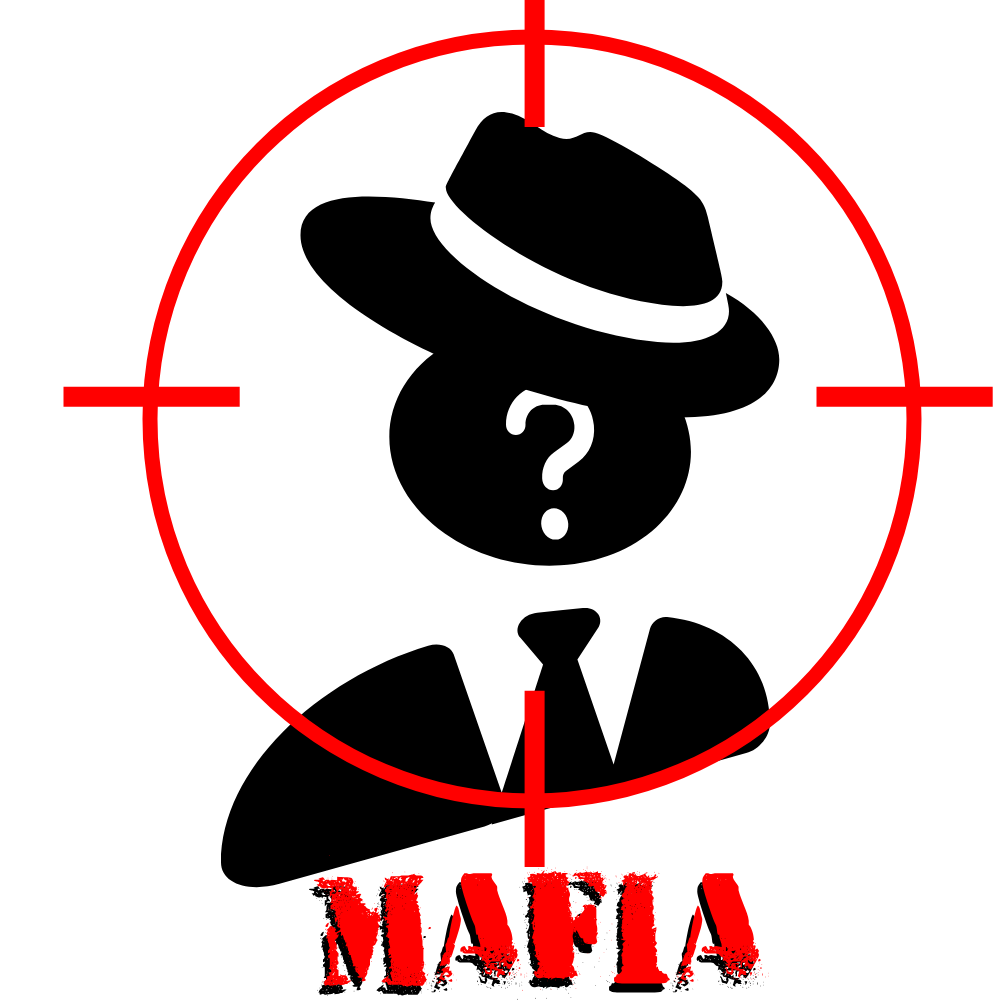
<style>
.page{position:relative;width:1000px;height:1000px;background:#ffffff}
.page>*{position:absolute;margin:0}
.t1{font:150px "HVDPeace";color:#ff0000}
.t2{font:150px "HVDPeace"}
</style>
<div class="page">
<p class="t1" style="left:314px;top:854px;width:455px;height:137px">MAFIA</p>
<p class="t2" style="left:309px;top:863px;width:455px;height:137px">MAFIA</p>
</div>
